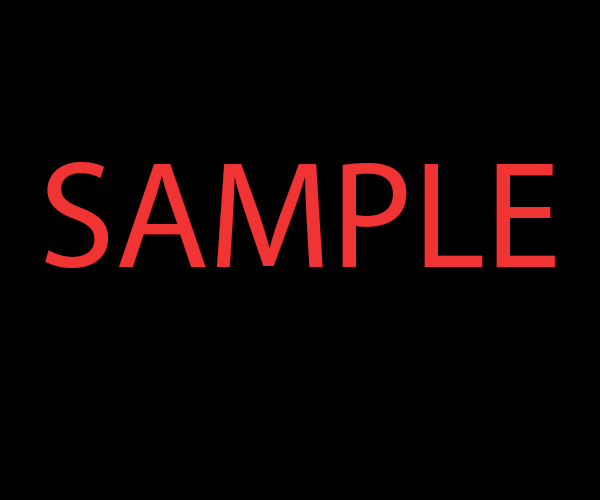
<style>
.page{position:relative;width:600px;height:500px;background:#000000}
.page>*{position:absolute;margin:0}
.t1{font:153.5px "MyriadPro-Regular";color:#f03333}
</style>
<div class="page">
<p class="t1" style="left:45px;top:162px;width:510px;height:106px">SAMPLE</p>
</div>
